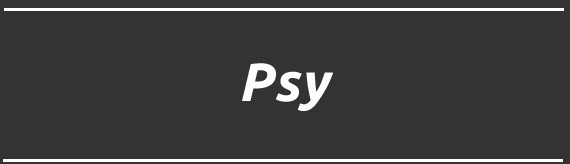
<style>
.page{position:relative;width:570px;height:164px;background:#333333}
.page>*{position:absolute;margin:0}
.t1{font:54px "Ubuntu-BoldItalic";color:#ffffff}
</style>
<div class="page">
<p class="t1" style="left:242px;top:63px;width:92px;height:48px">Psy</p>
</div>
